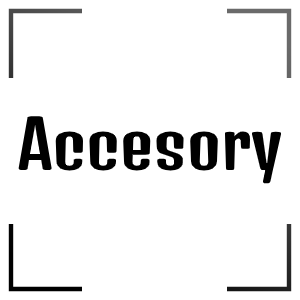
<style>
.page{position:relative;width:300px;height:300px;background:#ffffff}
.page>*{position:absolute;margin:0}
.t1{font:65px "DenkOne-Regular";color:#000000}
</style>
<div class="page">
<p class="t1" style="left:18px;top:116px;width:264px;height:68px">Accesory</p>
</div>
